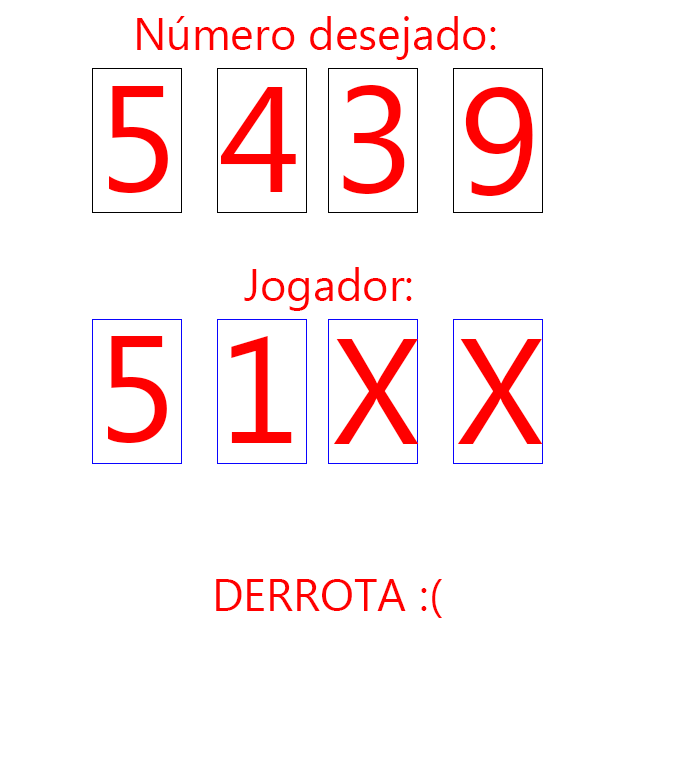
<style>
.page{position:relative;width:676px;height:783px;background:#ffffff}
.page>*{position:absolute;margin:0}
.t1{font:45px "MicrosoftTaiLe";color:#ff0000}
.t2{font:150px "MicrosoftTaiLe";color:#ff0000}
</style>
<div class="page">
<p class="t1" style="left:137px;top:16px;width:359px;height:44px">Número desejado:</p>
<p class="t2" style="left:109px;top:86px;width:59px;height:107px">5</p>
<p class="t2" style="left:221px;top:87px;width:75px;height:105px">4</p>
<p class="t2" style="left:343px;top:85px;width:62px;height:109px">3</p>
<p class="t2" style="left:465px;top:87px;width:68px;height:109px">9</p>
<p class="t1" style="left:244px;top:267px;width:168px;height:44px">Jogador:</p>
<p class="t2" style="left:108px;top:336px;width:59px;height:107px">5</p>
<p class="t2" style="left:231px;top:336px;width:61px;height:107px">1</p>
<p class="t2" style="left:333px;top:339px;width:86px;height:105px">X</p>
<p class="t2" style="left:457px;top:339px;width:86px;height:105px">X</p>
<p class="t1" style="left:216px;top:579px;width:226px;height:39px">DERROTA :(</p>
</div>
